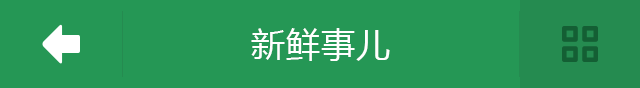
<style>
.page{position:relative;width:640px;height:88px;background:#259755}
.page>*{position:absolute;margin:0}
.t1{font:34px "MicrosoftYaHei";letter-spacing:0.025em;color:#ffffff}
</style>
<div class="page">
<p class="t1" style="left:251px;top:28px;width:139px;height:33px">新鲜事儿</p>
</div>
